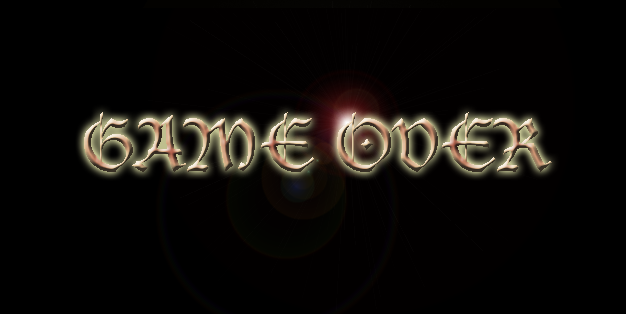
<style>
.page{position:relative;width:626px;height:314px;background:#000000}
.page>*{position:absolute;margin:0}
.t1{font:71.8px "LucidaBlackletter"}
</style>
<div class="page">
<p class="t1" style="left:84px;top:112px;width:468px;height:60px">GAME OVER</p>
</div>
